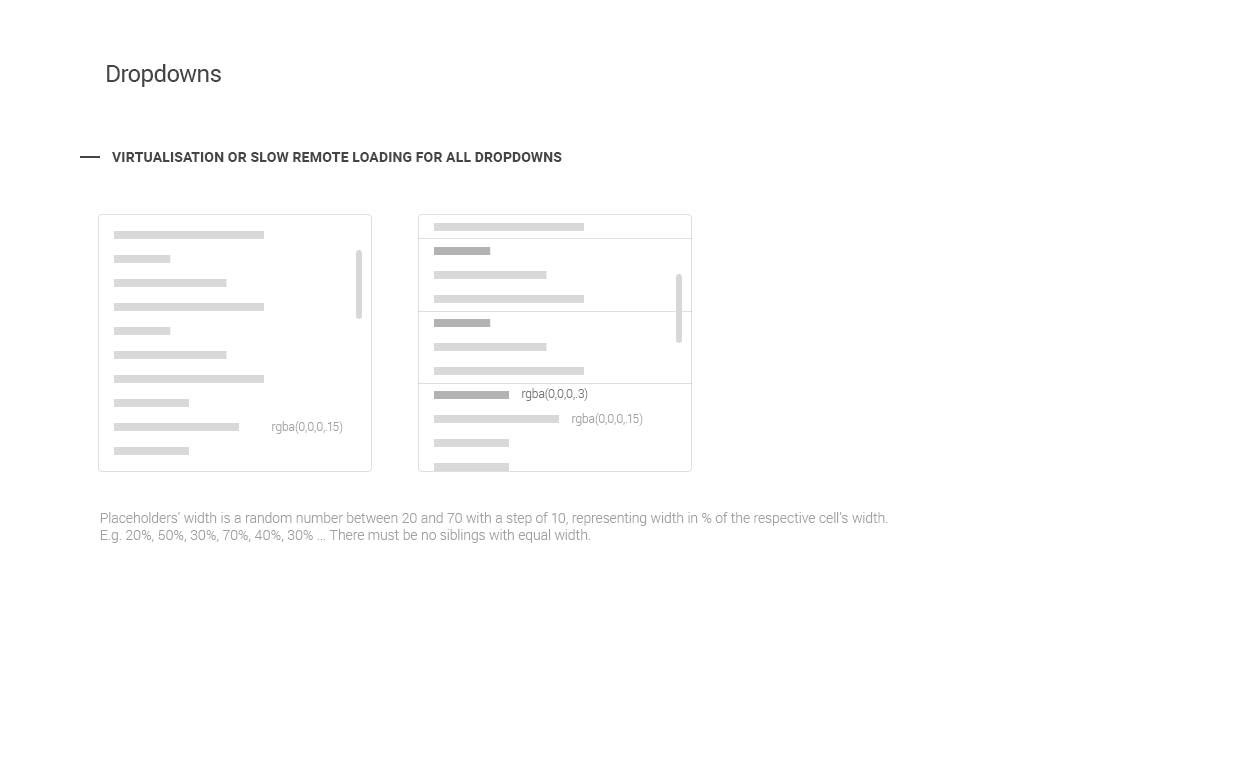
<style>
.page{position:relative;width:1253px;height:765px;background:#ffffff}
.page>*{position:absolute;margin:0}
.t1{font:24px "Roboto-Regular";letter-spacing:-0.025em;color:#454545}
.t2{font:14px "Roboto-Bold";letter-spacing:0.01em;color:#454545;text-transform:uppercase}
.t3{font:12px "Roboto-Light";color:#737373}
.t4{font:12px "Roboto-Light";color:#a3a3a3}
.t5{font:14px "Roboto-Light";color:#a1a1a1}
</style>
<div class="page">
<p class="t1" style="left:107px;top:64px;width:114px;height:23px">Dropdowns</p>
<p class="t2" style="left:112px;top:152px;width:450px;height:10px">virtualisation or slow remote loading for all dropdowns</p>
<p class="t3" style="left:522px;top:388px;width:66px;height:13px">rgba(0,0,0,.3)</p>
<p class="t4" style="left:572px;top:413px;width:71px;height:13px">rgba(0,0,0,.15)</p>
<p class="t4" style="left:272px;top:421px;width:71px;height:13px">rgba(0,0,0,.15)</p>
<p class="t5" style="left:100px;top:512px;width:788px;height:31px">Placeholders’ width is a random number between 20 and 70 with a step of 10, representing width in % of the respective cell’s width.<br>E.g. 20%, 50%, 30%, 70%, 40%, 30% ... There must be no siblings with equal width.</p>
</div>
